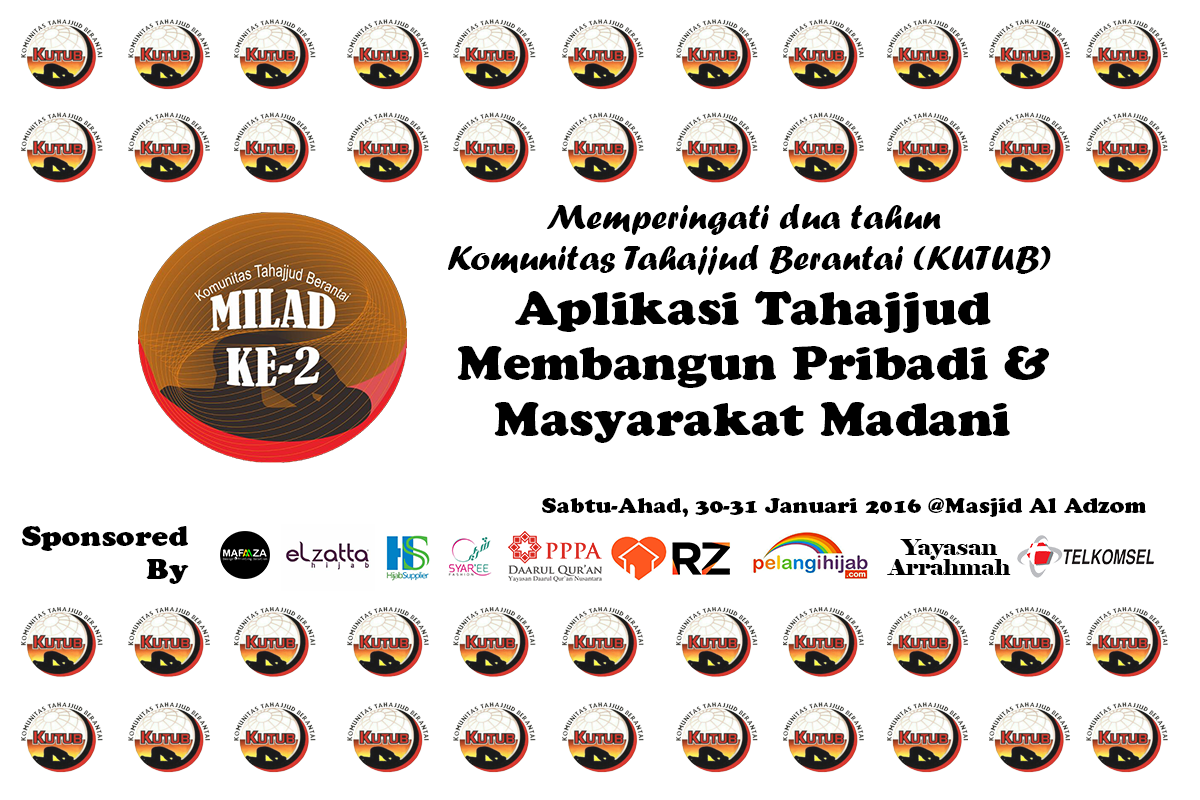
<style>
.page{position:relative;width:1200px;height:800px;background:#ffffff}
.page>*{position:absolute;margin:0}
.t1{font:34.6px "ForteMT";color:#000000;scale:1.07 1}
.t2{font:46.1px "CooperBlackStd";color:#000000;scale:1.07 1}
.t3{font:20.7px "CooperBlackStd";color:#000000;scale:1.07 1}
.t4{font:27.7px "CooperBlackStd";color:#000000;scale:1.07 1}
.t5{font:22.4px/1.9px "Elephant-Regular";color:#000000;scale:1.05 1}
</style>
<div class="page">
<p class="t1" style="left:448px;top:204px;width:603px;height:71px;text-align:center">Memperingati dua tahun <br>Komunitas Tahajjud Berantai (KUTUB)</p>
<p class="t2" style="left:457px;top:291px;width:592px;height:152px;text-align:center">Aplikasi Tahajjud<br>Membangun Pribadi &amp;<br>Masyarakat Madani</p>
<p class="t3" style="left:542px;top:498px;width:604px;height:19px">Sabtu-Ahad, 30-31 Januari 2016 @Masjid Al Adzom</p>
<p class="t4" style="left:22px;top:526px;width:167px;height:58px;text-align:right">Sponsored<br>By</p>
<p class="t5" style="left:887px;top:539px;width:124px;height:36px;text-align:center">Yayasan<br>Arrahmah</p>
</div>
